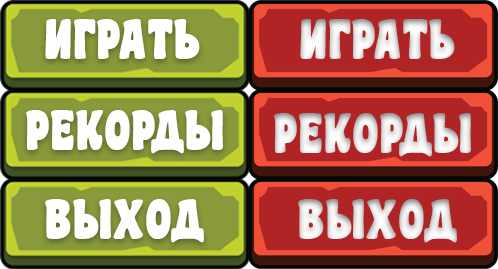
<style>
.page{position:relative;width:498px;height:269px}
.page>*{position:absolute;margin:0}
.t1{font:50px "mr_CoasterG-Black";color:#ffffff}
.t2{font:50px "mr_CoasterG-Black";color:#eaeaea}
.t3{font:50px "mr_CoasterG-Black";color:#e9e9e9}
</style>
<div class="page">
<p class="t1" style="left:45px;top:19px;width:155px;height:40px">ИГРАТЬ</p>
<p class="t2" style="left:300px;top:19px;width:155px;height:40px">ИГРАТЬ</p>
<p class="t1" style="left:26px;top:110px;width:197px;height:44px">РЕКОРДЫ</p>
<p class="t3" style="left:274px;top:113px;width:197px;height:44px">РЕКОРДЫ</p>
<p class="t1" style="left:45px;top:199px;width:159px;height:44px">ВЫХОД</p>
<p class="t2" style="left:298px;top:199px;width:159px;height:44px">ВЫХОД</p>
</div>
